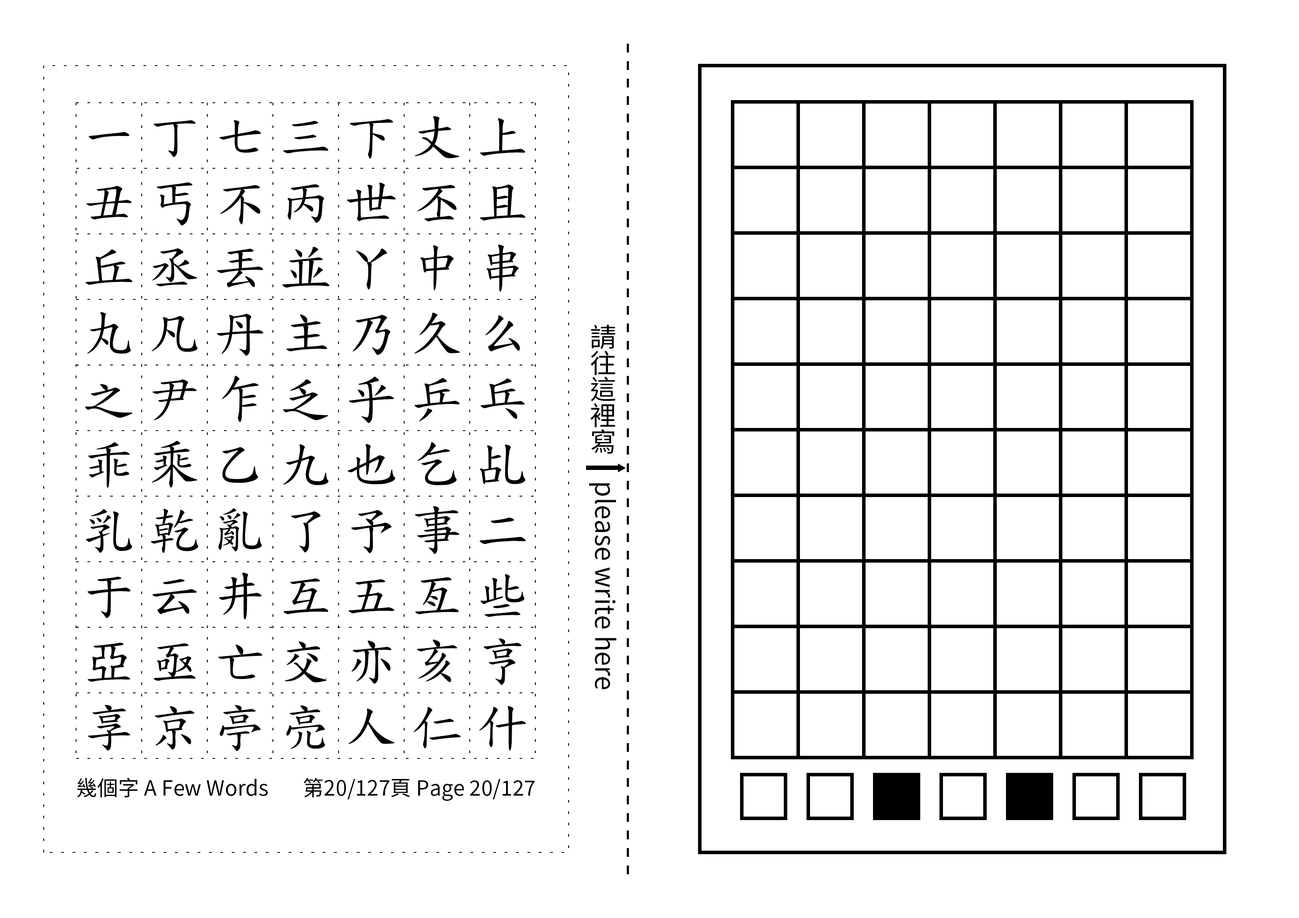
<style>
.page{position:relative;width:1299px;height:918px;background:#ffffff}
.page>*{position:absolute;margin:0}
.t1{font:52.5px/65.6px "TW-Kai-98_1";letter-spacing:0.25em;color:#000000}
.t2{font:26.2px "SourceHanSansTC-Regular";color:#000000}
.t3{font:21px "SourceHanSansTC-Regular";color:#000000}
</style>
<div class="page">
<p class="t1" style="left:85px;top:116px;width:441px;height:636px;text-align:center">一丁七三下丈上丑丐不丙世丕且丘丞丟並丫中串丸凡丹主乃久么之尹乍乏乎乒乓乖乘乙九也乞乩乳乾亂了予事二于云井互五亙些亞亟亡交亦亥亨享京亭亮人仁什</p>
<p class="t2" style="left:589px;top:324px;width:28px;height:366px;text-align:center">請往這裡寫　please write here</p>
<p class="t3" style="left:77px;top:778px;width:191px;height:20px">幾個字 A Few Words</p>
<p class="t3" style="left:303px;top:778px;width:232px;height:23px">第20/127頁 Page 20/127</p>
</div>
